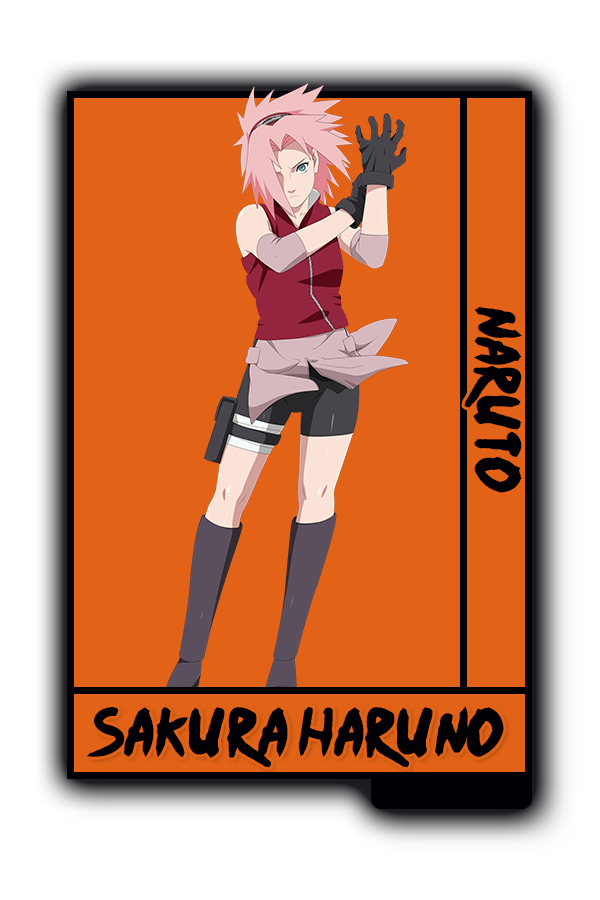
<style>
.page{position:relative;width:600px;height:900px;background:#e26317}
.page>*{position:absolute;margin:0}
.t1{font:52px "Ninja-Naruto";color:#010005}
.t2{font:55.4px "Ninja-Naruto";color:#010005}
</style>
<div class="page">
<p class="t1" style="left:464px;top:307px;width:59px;height:186px;rotate:90deg">Naruto</p>
<p class="t2" style="left:86px;top:706px;width:418px;height:62px">Sakura Haruno</p>
</div>
